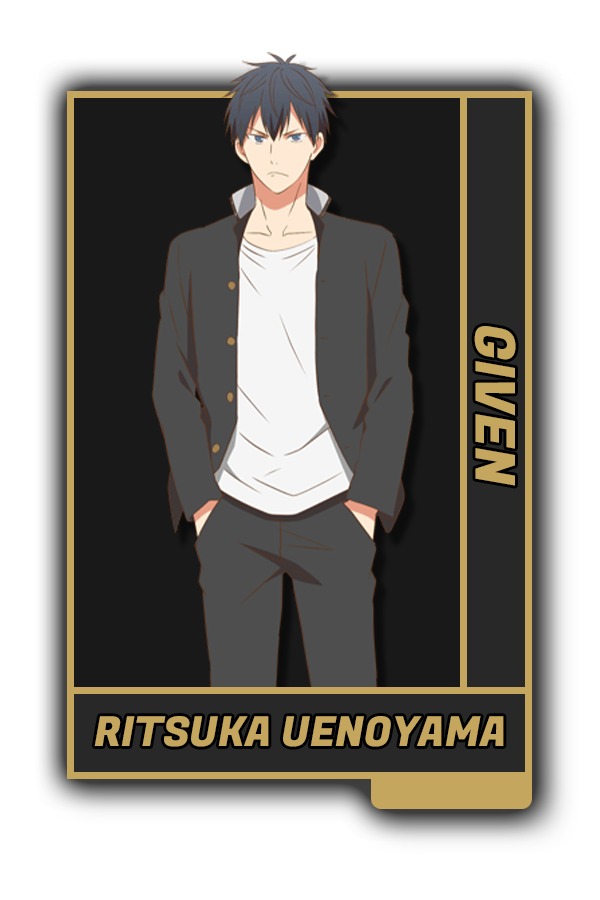
<style>
.page{position:relative;width:600px;height:900px;background:#ffffff}
.page>*{position:absolute;margin:0}
.t1{font:54.9px "FugazOne-Regular";color:#c5a65e}
.t2{font:41.3px "FugazOne-Regular";color:#c5a65e}
</style>
<div class="page">
<p class="t1" style="left:474px;top:326px;width:42px;height:160px;rotate:90deg">GIVEN</p>
<p class="t2" style="left:94px;top:716px;width:410px;height:31px">RITSUKA UENOYAMA</p>
</div>
